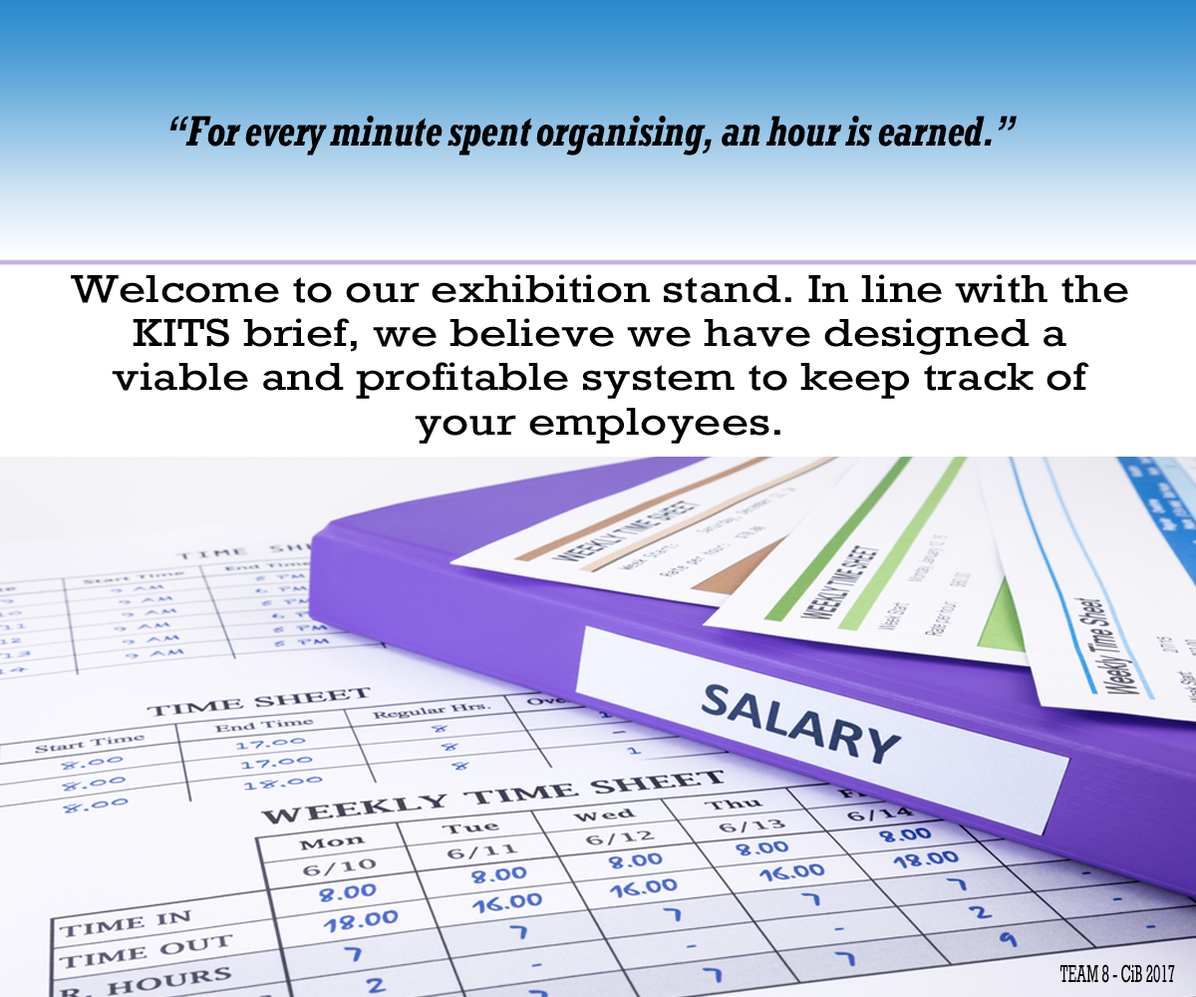
<style>
.page{position:relative;width:1196px;height:997px}
.page>*{position:absolute;margin:0}
.t1{font:39.9px "RockwellNova-CondBoldItalic";color:#000000;scale:0.94 1}
.t2{font:36.6px "RockwellNova";color:#000000;scale:1.2 1}
.t3{font:23.2px "RockwellNova";color:#000000;scale:0.54 1}
</style>
<div class="page">
<p class="t1" style="left:169px;top:116px;width:848px;height:40px">“For every minute spent organising, an hour is earned.”</p>
<p class="t2" style="left:71px;top:274px;width:1057px;height:170px;text-align:center">Welcome to our exhibition stand. In line with the KITS brief, we believe we have designed a viable and profitable system to keep track of your employees.</p>
<p class="t3" style="left:1061px;top:964px;width:114px;height:19px">TEAM 8 - CiB 2017</p>
</div>
